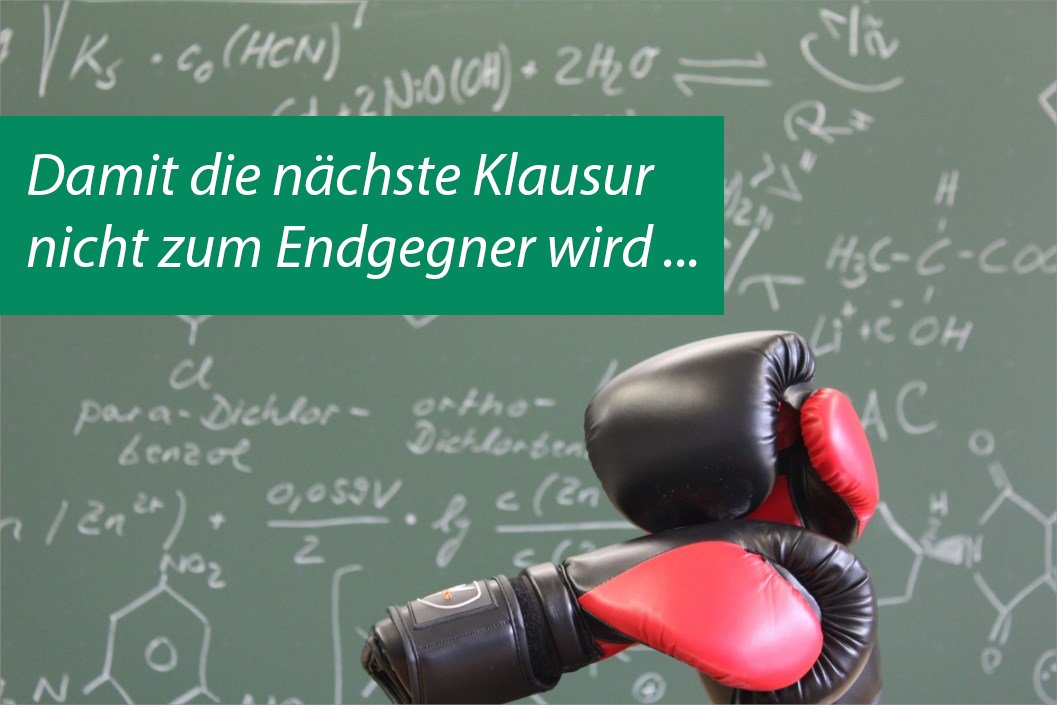
<style>
.page{position:relative;width:1057px;height:705px}
.page>*{position:absolute;margin:0}
.t1{font:60px "MyriadPro-It";color:#ffffff}
</style>
<div class="page">
<p class="t1" style="left:27px;top:152px;width:670px;height:127px">Damit die nächste Klausur<br>nicht zum Endgegner wird ...</p>
</div>
